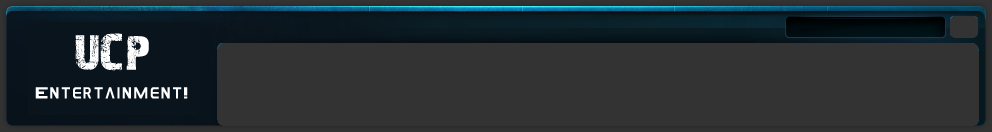
<style>
.page{position:relative;width:992px;height:132px;background:#333333}
.page>*{position:absolute;margin:0}
.t1{font:48px "28DaysLater";color:#ffffff}
.t2{font:14px "GAMECUBENDualSet";color:#ffffff}
</style>
<div class="page">
<p class="t1" style="left:75px;top:33px;width:74px;height:38px">UCP</p>
<p class="t2" style="left:35px;top:87px;width:153px;height:12px">Entertainment!</p>
</div>
